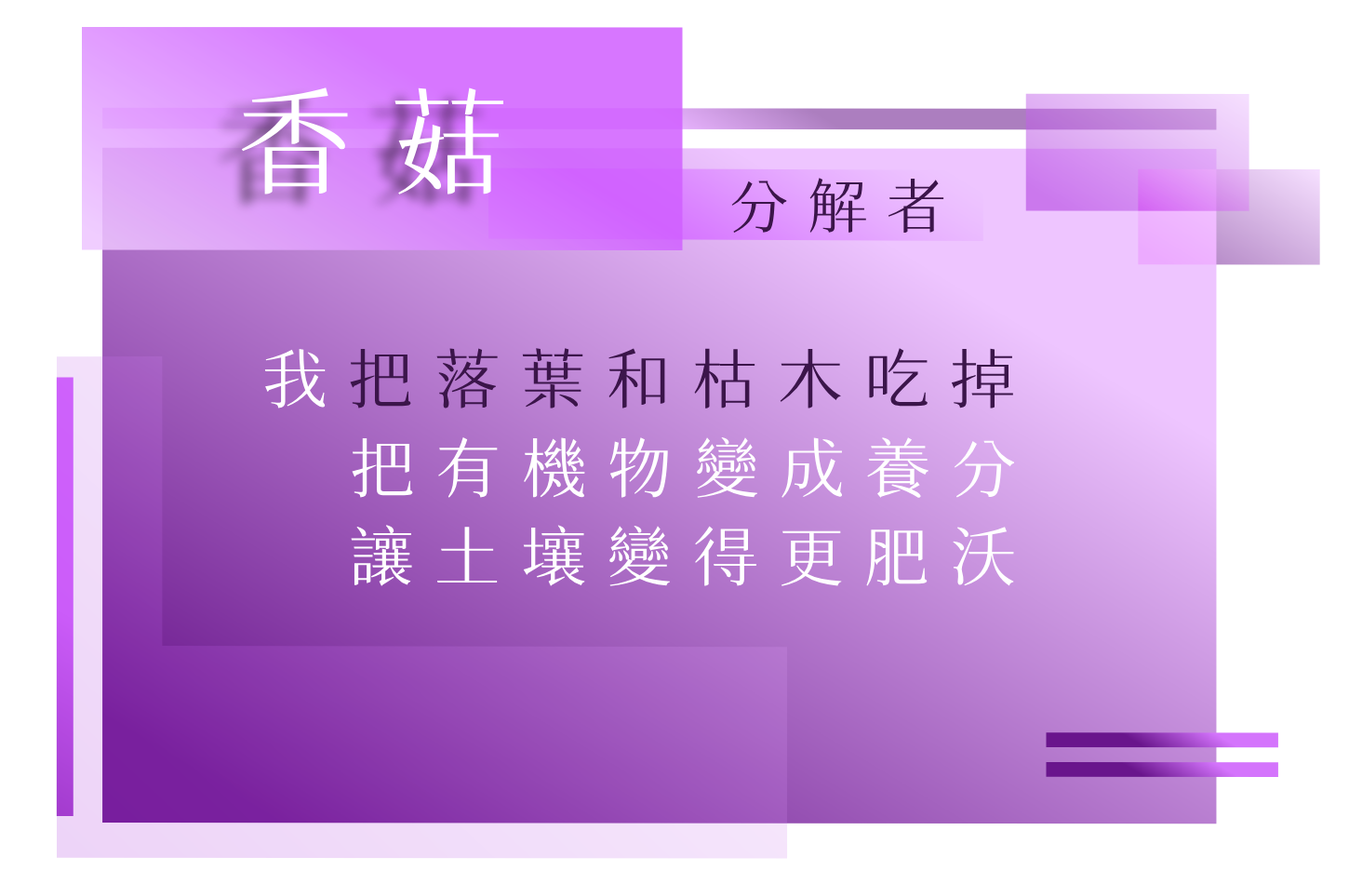
<style>
.page{position:relative;width:1349px;height:884px;background:#ffffff}
.page>*{position:absolute;margin:0}
.t1{font:116.3px "SweiSpringCJKtc-Regular";letter-spacing:0.32em;color:#ffffff;text-transform:uppercase}
.t2{font:59.5px "SweiSpringCJKtc-Regular";letter-spacing:0.32em;color:#3b154a;text-transform:uppercase}
.t3{font:65.1px "SweiSpringCJKtc-Regular";letter-spacing:0.32em;color:#3b154a;text-transform:uppercase}
.t4{font:65.1px "SweiSpringCJKtc-Regular";letter-spacing:0.32em;color:#ffffff;text-transform:uppercase}
</style>
<div class="page">
<p class="t1" style="left:241px;top:87px;width:262px;height:107px">香菇</p>
<p class="t2" style="left:731px;top:178px;width:213px;height:55px">分解者</p>
<p class="t3" style="left:264px;top:348px;width:749px;height:60px"><span class="t4">我</span>把落葉和枯木吃掉</p>
<p class="t4" style="left:352px;top:436px;width:663px;height:63px">把有機物變成養分</p>
<p class="t4" style="left:351px;top:525px;width:663px;height:61px">讓土壤變得更肥沃</p>
</div>
